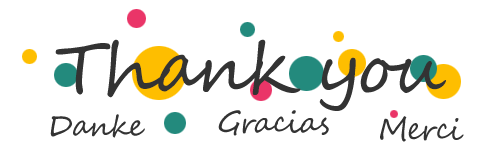
<style>
.page{position:relative;width:500px;height:150px;background:#ffffff}
.page>*{position:absolute;margin:0}
.t1{font:72px "SegoeScript";letter-spacing:-0.05em;color:#333333}
.t2{font:30px "SegoeScript";letter-spacing:-0.05em;color:#333333}
</style>
<div class="page">
<p class="t1" style="left:55px;top:39px;width:391px;height:72px">Thank you</p>
<p class="t2" style="left:218px;top:110px;width:111px;height:26px">Gracias</p>
<p class="t2" style="left:50px;top:114px;width:95px;height:24px">Danke</p>
<p class="t2" style="left:380px;top:116px;width:84px;height:26px">Merci</p>
</div>
